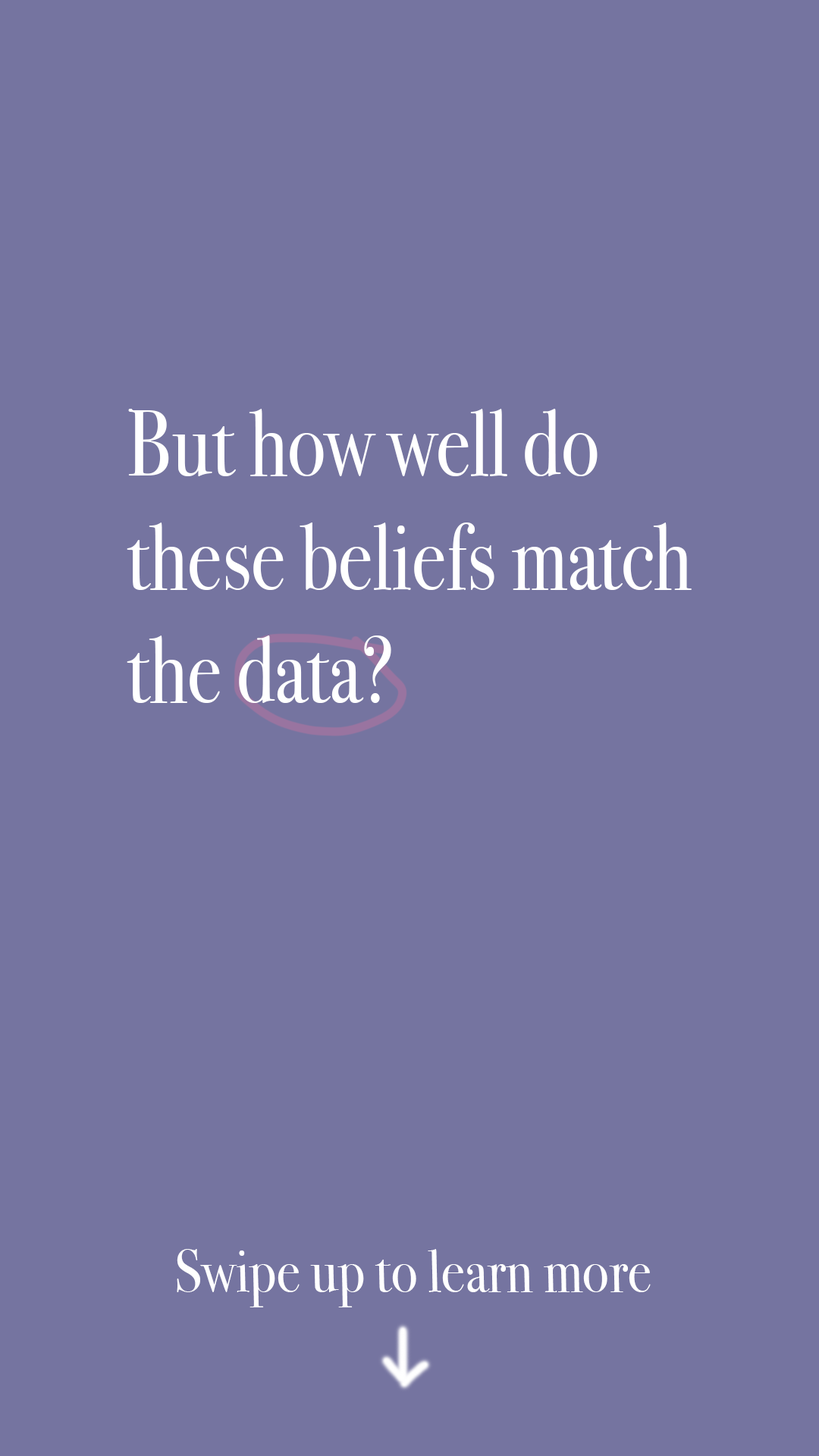
<style>
.page{position:relative;width:819px;height:1456px;background:#7574a0}
.page>*{position:absolute;margin:0}
.t1{font:94.6px "BodoniSvtyTwoITCTT-Book";color:#ffffff;scale:0.84 1}
.t2{font:61.2px "BodoniSvtyTwoITCTT-Book";color:#ffffff;scale:0.91 1}
</style>
<div class="page">
<p class="t1" style="left:127px;top:409px;width:565px;height:294px">But how well do <br>these beliefs match<br>the data?</p>
<p class="t2" style="left:177px;top:1249px;width:474px;height:58px">Swipe up to learn more</p>
</div>
